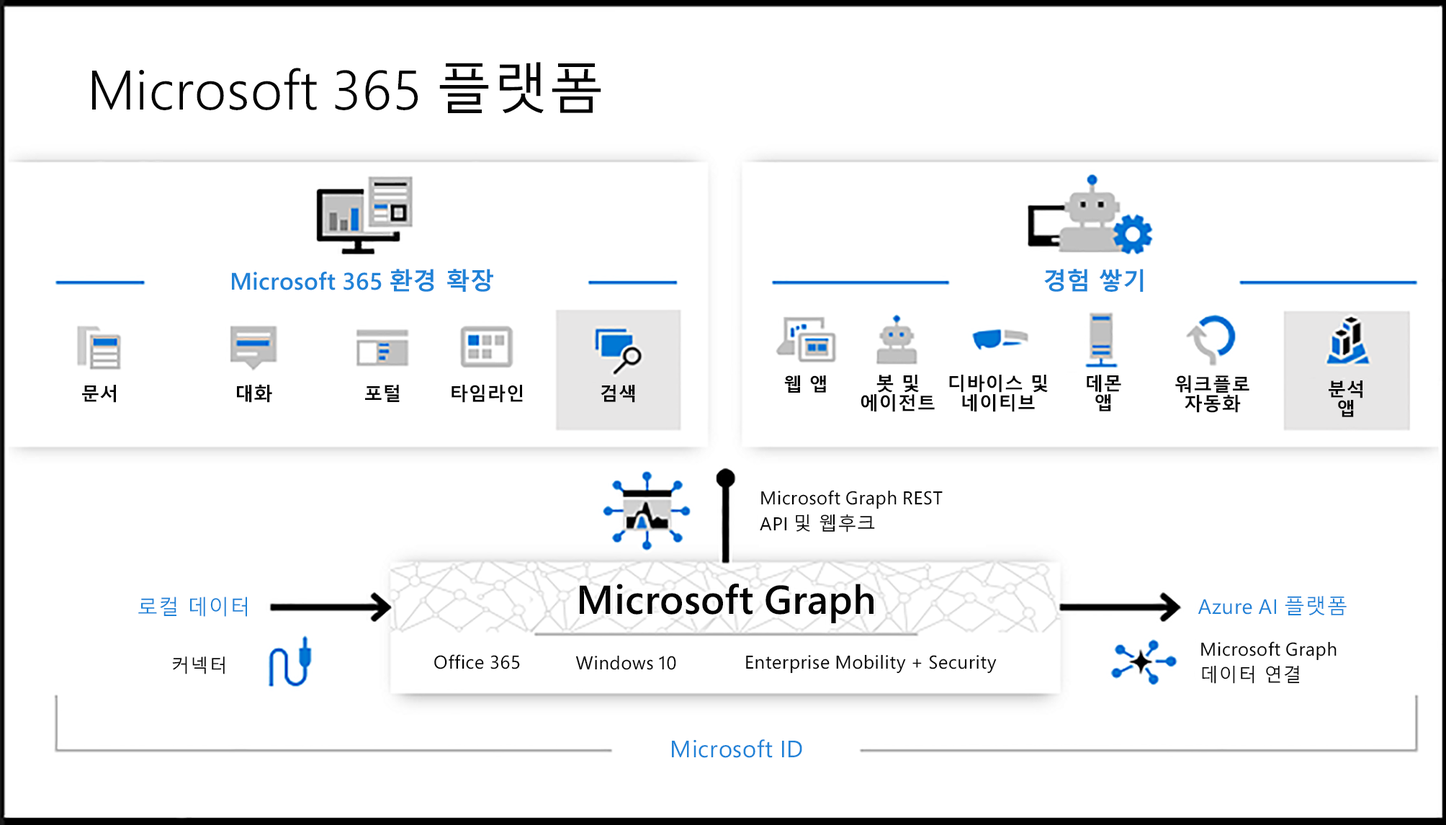
<style>
.page{position:relative;width:1446px;height:825px;background:#ffffff}
.page>*{position:absolute;margin:0}
.t1{font:55.4px "SegoePro-SemiLight";letter-spacing:0.015em;color:#030303}
.t2{font:55.4px "MalgunGothic";letter-spacing:0.015em;color:#030303}
.t3{font:24px "SegoePro-Semibold";letter-spacing:0.01em;color:#1f82d7}
.t4{font:24px "MalgunGothicBold";letter-spacing:0.01em;color:#1f82d7}
.t5{font:24px "MalgunGothicBold";color:#1f82d7}
.t6{font:18.6px "MalgunGothicBold";letter-spacing:0.01em;color:#030303}
.t7{font:18.6px/19.5px "MalgunGothicBold";letter-spacing:0.01em;color:#030303}
.t8{font:18.6px/25.5px "SegoePro";letter-spacing:0.015em;color:#030303}
.t9{font:18.6px/25.5px "MalgunGothic";letter-spacing:0.015em;color:#030303}
.t10{font:40.2px "SegoePro-Semibold";letter-spacing:0.007em;color:#030303}
.t11{font:20.6px "MalgunGothic";letter-spacing:0.025em;color:#1f82d7}
.t12{font:20.8px "SegoePro";letter-spacing:0.025em;color:#1f82d7}
.t13{font:20.8px "MalgunGothic";letter-spacing:0.025em;color:#1f82d7}
.t14{font:18.6px "SegoePro";letter-spacing:0.025em;color:#030303}
.t15{font:18.4px "MalgunGothic";letter-spacing:0.025em;color:#030303}
.t16{font:23.8px "SegoePro";letter-spacing:0.025em;color:#1f82d7}
</style>
<div class="page">
<p class="t1" style="left:92px;top:62px;width:509px;height:52px">Microsoft 365 <span class="t2">플랫폼</span></p>
<p class="t3" style="left:232px;top:269px;width:261px;height:23px">Microsoft 365 <span class="t4">환경 확장</span></p>
<p class="t5" style="left:1044px;top:269px;width:100px;height:23px">경험 쌓기</p>
<p class="t6" style="left:784px;top:375px;width:42px;height:17px">웹 앱</p>
<p class="t7" style="left:861px;top:374px;width:74px;height:38px;text-align:center">봇 및 에이전트</p>
<p class="t7" style="left:949px;top:374px;width:99px;height:38px;text-align:center">디바이스 및 네이티브</p>
<p class="t7" style="left:1087px;top:374px;width:34px;height:37px;text-align:center">데몬 <br>앱</p>
<p class="t7" style="left:1175px;top:375px;width:74px;height:38px;text-align:center">워크플로 자동화</p>
<p class="t6" style="left:82px;top:385px;width:34px;height:18px">문서</p>
<p class="t6" style="left:237px;top:384px;width:35px;height:19px">대화</p>
<p class="t6" style="left:365px;top:385px;width:35px;height:17px">포털</p>
<p class="t6" style="left:452px;top:385px;width:71px;height:18px">타임라인</p>
<p class="t6" style="left:601px;top:385px;width:34px;height:18px">검색</p>
<p class="t7" style="left:1329px;top:380px;width:34px;height:37px;text-align:center">분석 <br>앱</p>
<p class="t8" style="left:760px;top:490px;width:183px;height:42px">Microsoft Graph REST API <span class="t9">및 웹후크</span></p>
<p class="t10" style="left:580px;top:583px;width:294px;height:40px">Microsoft Graph</p>
<p class="t11" style="left:138px;top:596px;width:109px;height:20px">로컬 데이터</p>
<p class="t12" style="left:1198px;top:596px;width:149px;height:19px">Azure AI <span class="t13">플랫폼</span></p>
<p class="t8" style="left:1201px;top:641px;width:136px;height:42px">Microsoft Graph <span class="t9">데이터 연결</span></p>
<p class="t14" style="left:434px;top:654px;width:86px;height:15px">Office 365</p>
<p class="t14" style="left:746px;top:654px;width:251px;height:19px">Enterprise Mobility + Security</p>
<p class="t15" style="left:172px;top:656px;width:53px;height:18px">커넥터</p>
<p class="t14" style="left:575px;top:655px;width:101px;height:15px">Windows 10</p>
<p class="t16" style="left:672px;top:739px;width:130px;height:19px">Microsoft ID</p>
</div>
